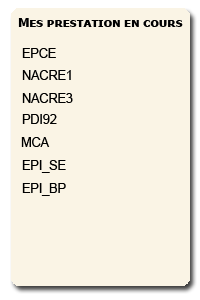
<style>
.page{position:relative;width:200px;height:300px;background:#faf4e5}
.page>*{position:absolute;margin:0}
.t1{font:12.5px "TahomaSmallCap-Bold";color:#000001}
.t2{font:12.5px "ArialMT";color:#000000}
.t3{font:12.5px "ArialMT";color:#010101}
</style>
<div class="page">
<p class="t1" style="left:18px;top:18px;width:165px;height:9px">Mes prestation en cours</p>
<p class="t2" style="left:22px;top:48px;width:34px;height:10px">EPCE</p>
<p class="t3" style="left:22px;top:70px;width:49px;height:10px">NACRE1</p>
<p class="t2" style="left:22px;top:93px;width:51px;height:10px">NACRE3</p>
<p class="t2" style="left:22px;top:114px;width:35px;height:10px">PDI92</p>
<p class="t2" style="left:21px;top:137px;width:29px;height:10px">MCA</p>
<p class="t2" style="left:22px;top:160px;width:44px;height:13px">EPI_SE</p>
<p class="t2" style="left:22px;top:183px;width:44px;height:13px">EPI_BP</p>
</div>
